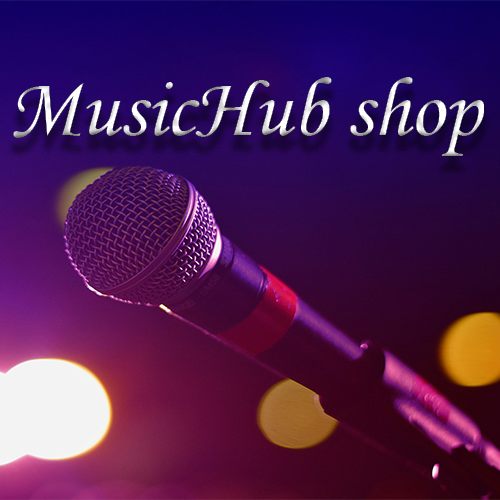
<style>
.page{position:relative;width:500px;height:500px}
.page>*{position:absolute;margin:0}
.t1{font:84.6px "MonotypeCorsiva"}
</style>
<div class="page">
<p class="t1" style="left:13px;top:77px;width:471px;height:79px">MusicHub shop</p>
</div>
